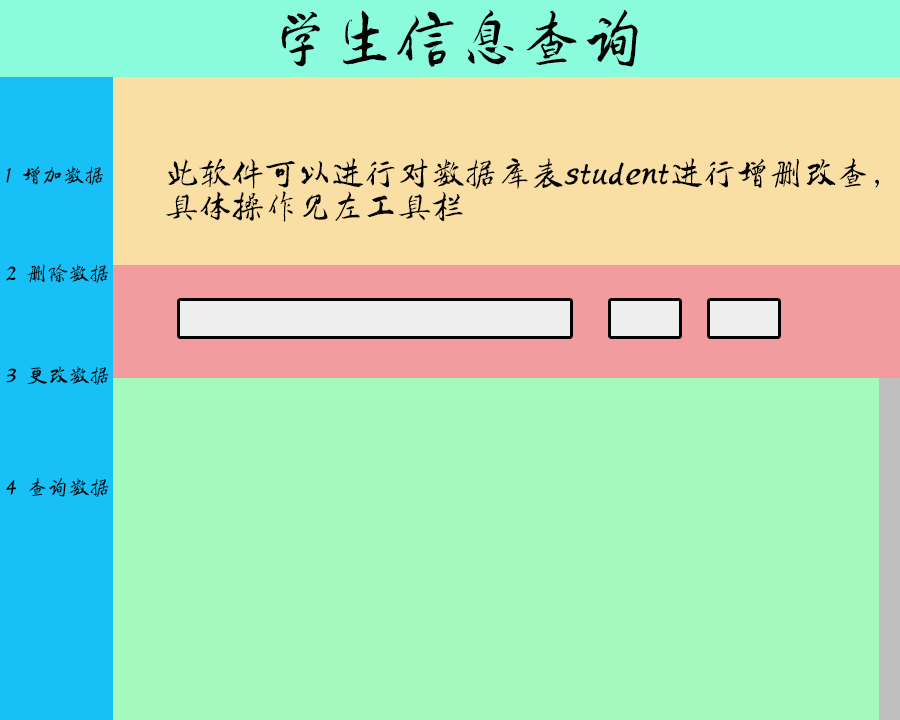
<style>
.page{position:relative;width:900px;height:720px;background:#a4fabc}
.page>*{position:absolute;margin:0}
.t1{font:62.5px "Tensentype-TieShanKaiShuJ";color:#020201}
.t2{font:33.3px/33.3px "Tensentype-TieShanKaiShuJ";color:#020201}
.t3{font:20.8px "Tensentype-TieShanKaiShuJ";color:#020201}
</style>
<div class="page">
<p class="t1" style="left:281px;top:9px;width:357px;height:58px">学生信息查询</p>
<p class="t2" style="left:166px;top:158px;width:713px;height:64px">此软件可以进行对数据库表student进行增删改查，<br>具体操作见左工具栏</p>
<p class="t3" style="left:6px;top:166px;width:97px;height:19px">1 增加数据</p>
<p class="t3" style="left:6px;top:264px;width:102px;height:19px">2 删除数据</p>
<p class="t3" style="left:6px;top:366px;width:103px;height:19px">3 更改数据</p>
<p class="t3" style="left:6px;top:477px;width:103px;height:20px">4 查询数据</p>
</div>
